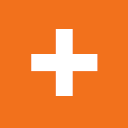
<style>
.page{position:relative;width:128px;height:128px;background:#f2711c}
.page>*{position:absolute;margin:0}
.t1{font:140px "Impact";color:#ffffff}
</style>
<div class="page">
<p class="t1" style="left:31px;top:29px;width:67px;height:67px">+</p>
</div>
